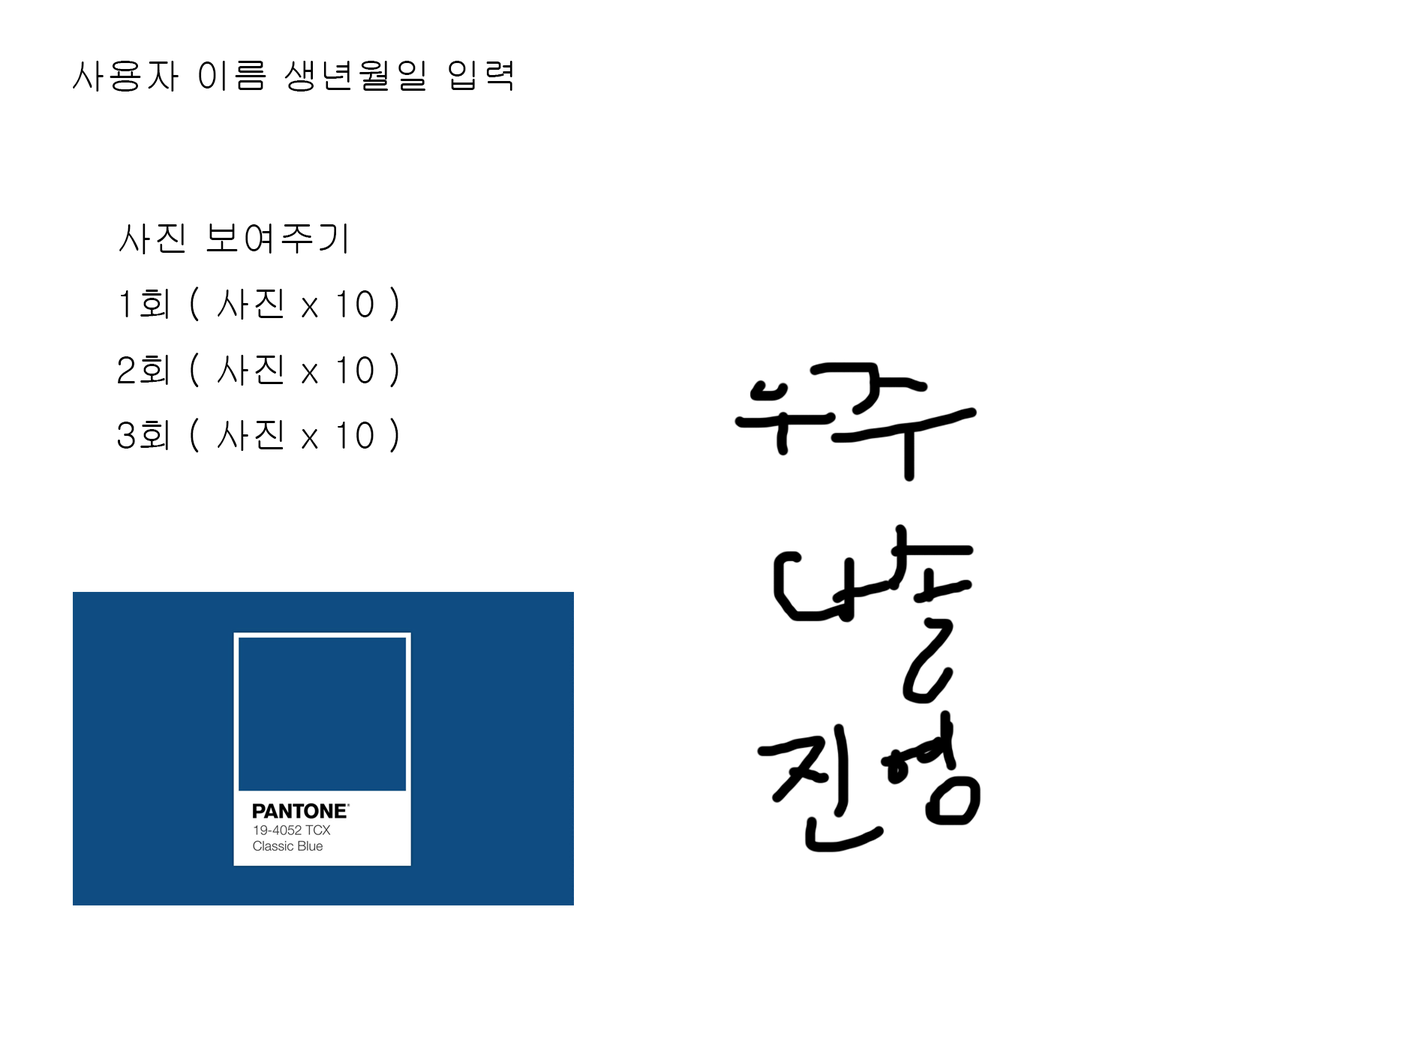
<style>
.page{position:relative;width:1418px;height:1063px;background:#ffffff}
.page>*{position:absolute;margin:0}
.t1{font:9px "Gulim";color:#000000}
</style>
<div class="page">
<p class="t1" style="left:73px;top:61px;width:439px;height:31px">사용자 이름 생년월일 입력</p>
<p class="t1" style="left:118px;top:224px;width:280px;height:229px">사진 보여주기<br>1회 ( 사진 x 10 )<br>2회 ( 사진 x 10 )<br>3회 ( 사진 x 10 )</p>
</div>
